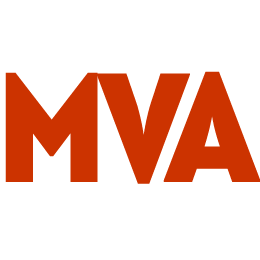
<style>
.page{position:relative;width:260px;height:260px;background:#ffffff}
.page>*{position:absolute;margin:0}
.t1{font:155px "IntroCondBlackFree";color:#cc3300}
</style>
<div class="page">
<p class="t1" style="left:5px;top:71px;width:256px;height:113px">MVA</p>
</div>
